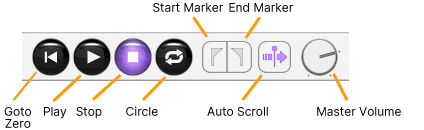
<style>
.page{position:relative;width:424px;height:130px;background:#ffffff}
.page>*{position:absolute;margin:0}
.t1{font:12px "Sarasa-Gothic-SC-Regular";color:#000000}
.t2{font:12px/12px "Sarasa-Gothic-SC-Regular";color:#000000}
</style>
<div class="page">
<p class="t1" style="left:153px;top:3px;width:70px;height:9px">Start Marker</p>
<p class="t1" style="left:229px;top:3px;width:64px;height:9px">End Marker</p>
<p class="t2" style="left:4px;top:107px;width:27px;height:21px;text-align:center">Goto<br>Zero</p>
<p class="t1" style="left:44px;top:107px;width:23px;height:12px">Play</p>
<p class="t1" style="left:76px;top:107px;width:26px;height:12px">Stop</p>
<p class="t1" style="left:126px;top:106px;width:32px;height:10px">Circle</p>
<p class="t1" style="left:207px;top:107px;width:61px;height:9px">Auto Scroll</p>
<p class="t1" style="left:317px;top:107px;width:84px;height:9px">Master Volume</p>
</div>
